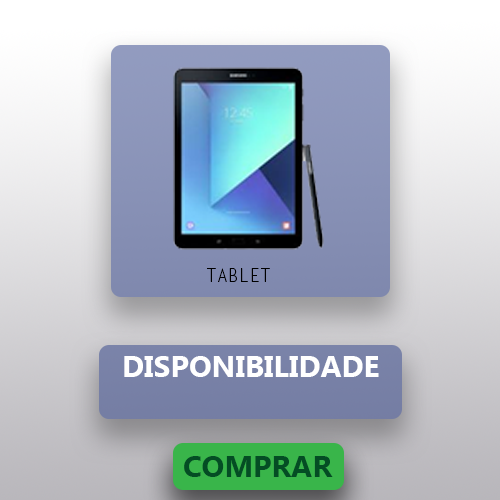
<style>
.page{position:relative;width:500px;height:500px}
.page>*{position:absolute;margin:0}
.t1{font:18px "LetterGothicStd";color:#000000}
.t2{font:30px "MicrosoftTaiLe-Bold";color:#ffffff}
.t3{font:30px "MicrosoftTaiLe-Bold";color:#044d24}
</style>
<div class="page">
<p class="t1" style="left:207px;top:268px;width:63px;height:14px">TABLET</p>
<p class="t2" style="left:124px;top:356px;width:255px;height:21px">DISPONIBILIDADE</p>
<p class="t3" style="left:184px;top:456px;width:149px;height:21px">COMPRAR</p>
</div>
